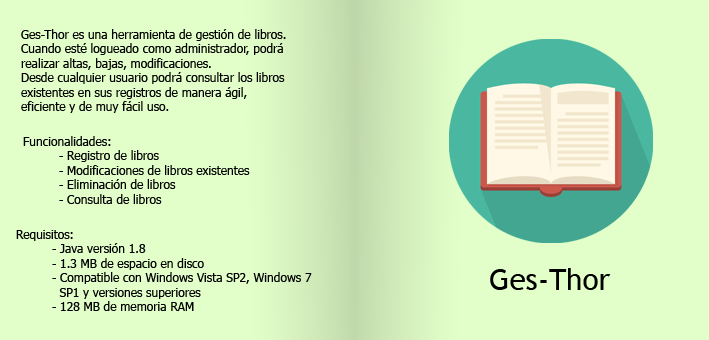
<style>
.page{position:relative;width:709px;height:340px;background:#e2ffc9}
.page>*{position:absolute;margin:0}
.t1{font:12px "Tahoma";color:#000000}
.t2{font:30px "TrebuchetMS";color:#000000}
</style>
<div class="page">
<p class="t1" style="left:21px;top:29px;width:265px;height:84px">Ges-Thor es una herramienta de gestión de libros. <br>Cuando esté logueado como administrador, podrá <br>realizar altas, bajas, modificaciones. <br>Desde cualquier usuario podrá consultar los libros <br>existentes en sus registros de manera ágil, <br>eficiente y de muy fácil uso.</p>
<p class="t1" style="left:23px;top:136px;width:227px;height:68px">Funcionalidades:<br> - Registro de libros<br> - Modificaciones de libros existentes<br> - Eliminación de libros<br> - Consulta de libros</p>
<p class="t1" style="left:16px;top:230px;width:296px;height:81px">Requisitos:<br> - Java versión 1.8<br> - 1.3 MB de espacio en disco<br> - Compatible con Windows Vista SP2, Windows 7  <br>   SP1 y versiones superiores<br> - 128 MB de memoria RAM</p>
<p class="t2" style="left:490px;top:268px;width:121px;height:22px">Ges-Thor</p>
</div>
